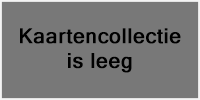
<style>
.page{position:relative;width:200px;height:100px;background:#787878}
.page>*{position:absolute;margin:0}
.t1{font:20.7px "MicrosoftSansSerif";letter-spacing:0.02em;color:#000000;font-weight:bold}
</style>
<div class="page">
<p class="t1" style="left:20px;top:28px;width:161px;height:45px;text-align:center">Kaartencollectie<br>is leeg</p>
</div>
